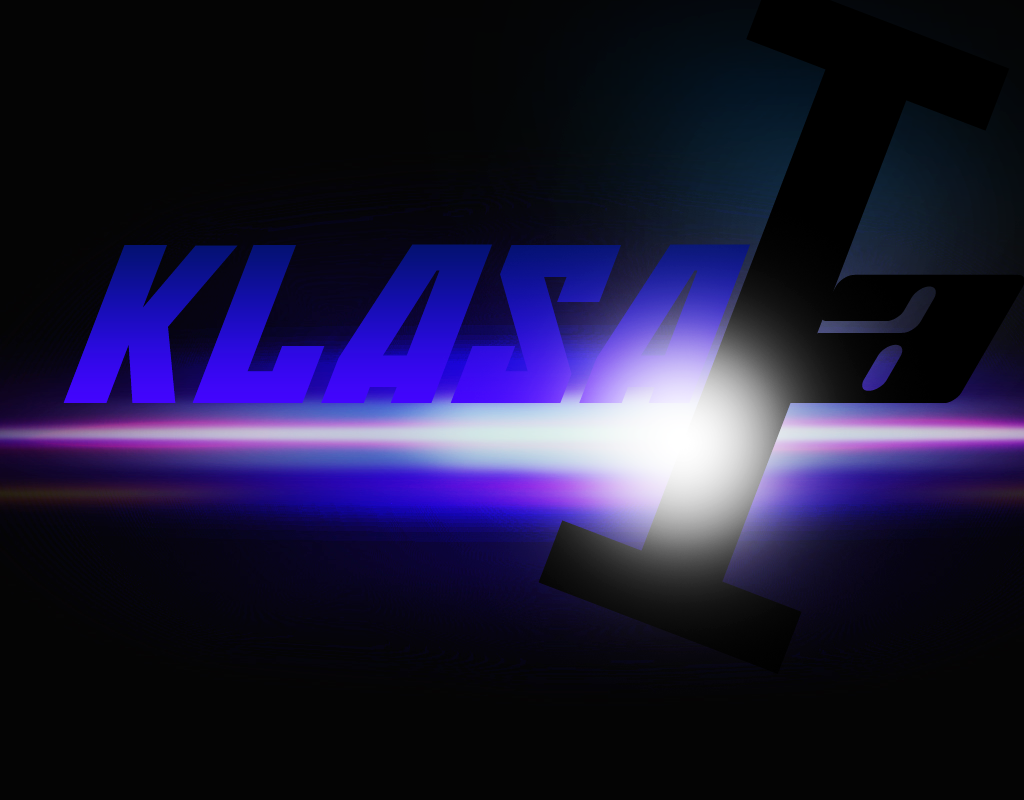
<style>
.page{position:relative;width:1024px;height:800px;background:#040404}
.page>*{position:absolute;margin:0}
.t1{font:243px "SovietBoldExpItal"}
.t2{font:243px "PlanetKosmos";color:#000000}
</style>
<div class="page">
<p class="t1" style="left:63px;top:244px;width:687px;height:159px">kLASA</p>
<p class="t2" style="left:773px;top:274px;width:252px;height:129px">a</p>
</div>
